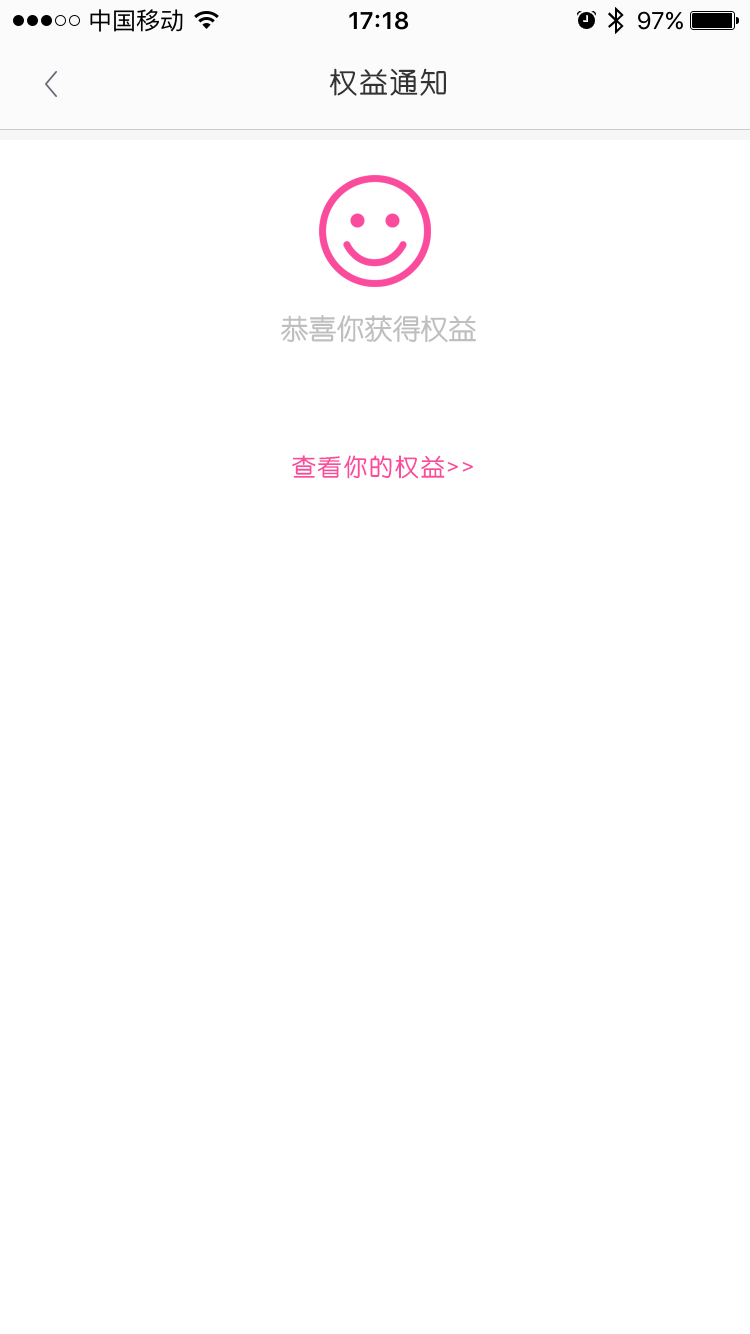
<style>
.page{position:relative;width:750px;height:1334px;background:#ffffff}
.page>*{position:absolute;margin:0}
.t1{font:28px "STYuanti-SC-Regular";letter-spacing:0.075em;color:#333333}
.t2{font:28px "STYuanti-SC-Regular";color:#bfbfc0}
.t3{font:24px "STYuanti-SC-Regular";letter-spacing:0.075em;color:#fb4b9c}
</style>
<div class="page">
<p class="t1" style="left:329px;top:68px;width:117px;height:28px">权益通知</p>
<p class="t2" style="left:281px;top:315px;width:195px;height:28px">恭喜你获得权益</p>
<p class="t3" style="left:292px;top:455px;width:181px;height:24px">查看你的权益&gt;&gt;</p>
</div>
